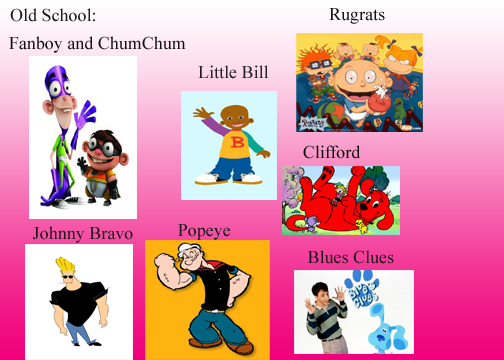
<style>
.page{position:relative;width:504px;height:360px}
.page>*{position:absolute;margin:0}
.t1{font:18px "TimesNewRomanPSMT";color:#1b1a1a}
.t2{font:18px "TimesNewRomanPSMT";color:#131112}
.t3{font:18px "TimesNewRomanPSMT";color:#222021}
.t4{font:18px "TimesNewRomanPSMT";color:#100f10}
</style>
<div class="page">
<p class="t1" style="left:10px;top:8px;width:85px;height:14px">Old School:</p>
<p class="t2" style="left:329px;top:8px;width:56px;height:16px">Rugrats</p>
<p class="t3" style="left:198px;top:65px;width:71px;height:14px">Little Bill</p>
<p class="t4" style="left:303px;top:145px;width:58px;height:14px">Clifford</p>
<p class="t1" style="left:33px;top:226px;width:100px;height:17px">Johnny Bravo</p>
<p class="t1" style="left:178px;top:224px;width:52px;height:16px">Popeye</p>
<p class="t1" style="left:307px;top:250px;width:87px;height:14px">Blues Clues</p>
</div>
